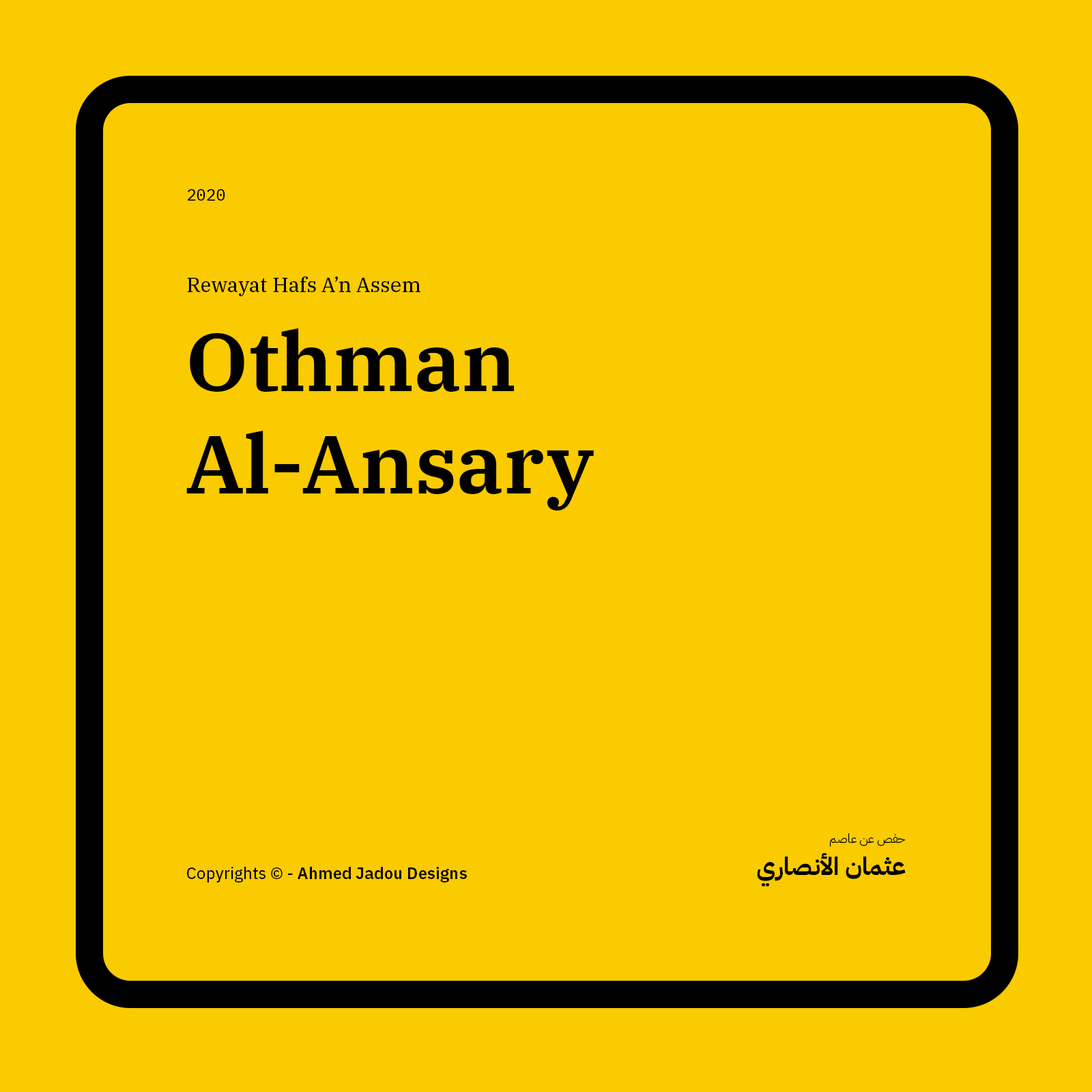
<style>
.page{position:relative;width:1092px;height:1092px;background:#facb00}
.page>*{position:absolute;margin:0}
.t1{font:16.4px "IBMPlexMono-Text";color:#000000}
.t2{font:20.5px "IBMPlexSerif-Text";color:#000000}
.t3{font:81.9px/102.7px "IBMPlexSerif-SemiBold";color:#000000}
.t4{font:12.3px "IBMPlexArabic-Light";color:#000000}
.t5{font:24.6px "IBMPlexArabic-Bold";color:#000000}
.t6{font:16.4px "IBMPlexSans-SemiBold";color:#000000}
.t7{font:16.4px "IBMPlexSans-Text";color:#000000}
</style>
<div class="page">
<p class="t1" style="left:188px;top:189px;width:37px;height:12px">2020</p>
<p class="t2" style="left:187px;top:276px;width:233px;height:20px">Rewayat Hafs A’n Assem</p>
<p class="t3" style="left:186px;top:328px;width:408px;height:183px">Othman Al-Ansary</p>
<p class="t4" style="left:830px;top:833px;width:76px;height:14px">حفص عن عاصم</p>
<p class="t5" style="left:757px;top:852px;width:149px;height:35px">عثمان الأنصاري</p>
<p class="t6" style="left:187px;top:867px;width:280px;height:15px"><span class="t7">Copyrights © - </span>Ahmed Jadou Designs</p>
</div>
